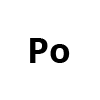
<style>
.page{position:relative;width:100px;height:100px;background:#ffffff}
.page>*{position:absolute;margin:0}
.t1{font:35px "OpenSans-Bold";color:#000000}
</style>
<div class="page">
<p class="t1" style="left:30px;top:38px;width:40px;height:25px">Po</p>
</div>
